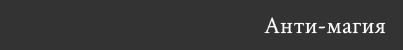
<style>
.page{position:relative;width:403px;height:50px;background:#333333}
.page>*{position:absolute;margin:0}
.t1{font:24px "CrimsonText-Regular";color:#ffffff}
</style>
<div class="page">
<p class="t1" style="left:264px;top:17px;width:122px;height:17px">Анти-магия</p>
</div>
